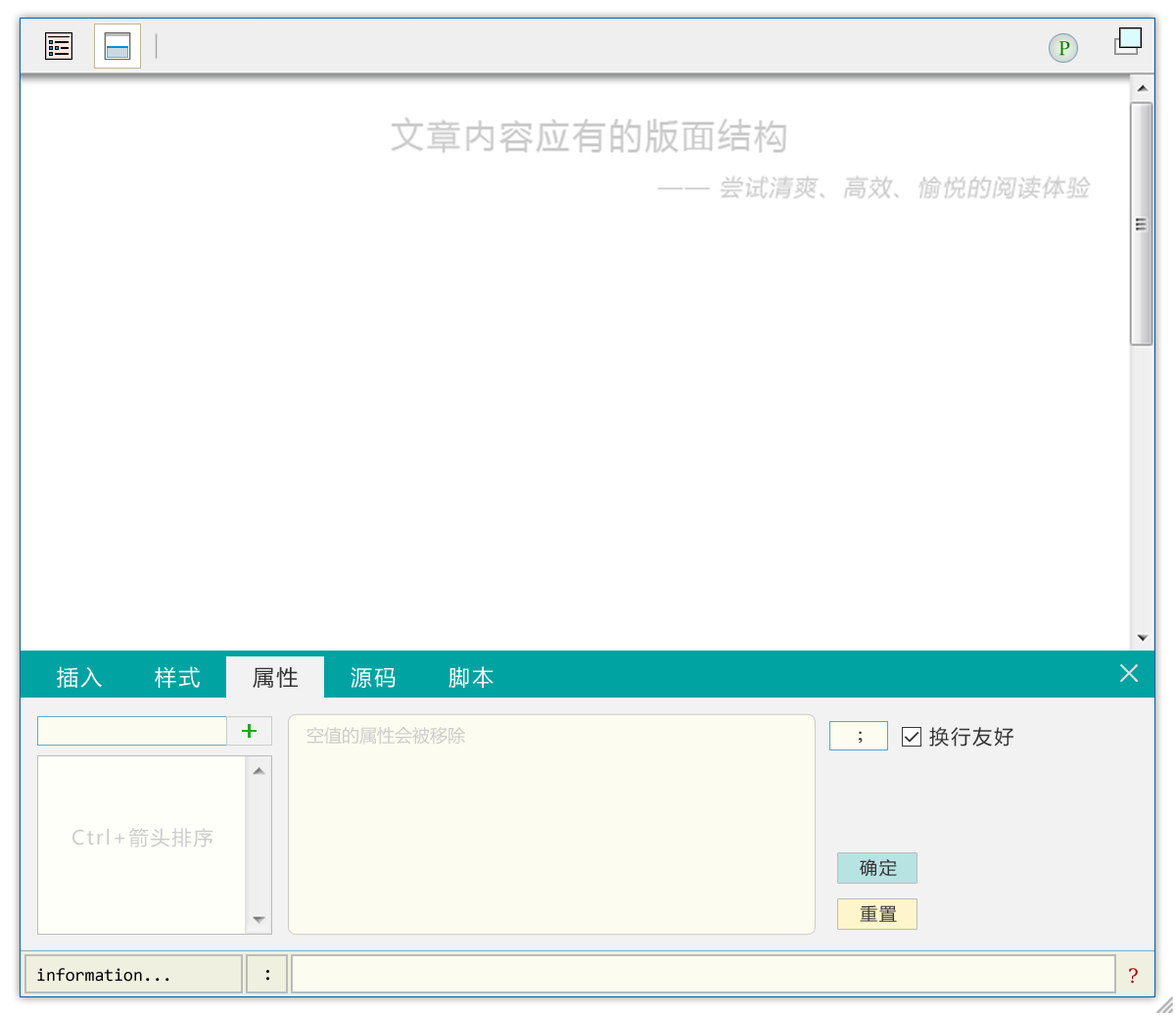
<style>
.page{position:relative;width:1175px;height:1015px;background:#ffffff}
.page>*{position:absolute;margin:0}
.t1{font:19.6px "Constantia";color:#1b7802}
.t2{font:21.5px "MicrosoftYaHei";letter-spacing:0.1em;color:#ffffff}
.t3{font:27.4px "NSimSun";letter-spacing:0.1em;color:#dddddd;font-weight:bold}
.t4{font:21.5px "MicrosoftYaHei";letter-spacing:0.1em;color:#333333}
.t5{font:17.6px "MicrosoftYaHei";color:#cccccc}
.t6{font:17.6px "TimesNewRomanPSMT";letter-spacing:0.1em;color:#333333;font-weight:bold}
.t7{font:19.6px "MicrosoftYaHei";letter-spacing:0.1em;color:#333333}
.t8{font:19.6px "MicrosoftYaHei";letter-spacing:0.1em;color:#cccccc}
.t9{font:17.6px "MicrosoftYaHei";letter-spacing:0.1em;color:#333333}
.t10{font:17.6px "Consolas";color:#000000}
.t11{font:19.6px "Consolas";color:#000000}
.t12{font:19.6px "DejaVuSerif";color:#aa0000}
</style>
<div class="page">
<p class="t1" style="left:1060px;top:41px;width:10px;height:15px">P</p>
<p class="t2" style="left:57px;top:666px;width:45px;height:22px">插入</p>
<p class="t2" style="left:155px;top:666px;width:45px;height:22px">样式</p>
<p class="t2" style="left:449px;top:666px;width:45px;height:22px">脚本</p>
<p class="t3" style="left:1120px;top:664px;width:19px;height:18px">×</p>
<p class="t4" style="left:253px;top:667px;width:45px;height:21px">属性</p>
<p class="t2" style="left:351px;top:667px;width:45px;height:21px">源码</p>
<p class="t5" style="left:307px;top:727px;width:158px;height:17px">空值的属性会被移除</p>
<p class="t6" style="left:859px;top:731px;width:4px;height:12px">;</p>
<p class="t7" style="left:929px;top:727px;width:85px;height:19px">换行友好</p>
<p class="t8" style="left:72px;top:828px;width:141px;height:19px">Ctrl+箭头排序</p>
<p class="t9" style="left:860px;top:859px;width:37px;height:18px">确定</p>
<p class="t9" style="left:860px;top:905px;width:37px;height:17px">重置</p>
<p class="t10" style="left:37px;top:968px;width:132px;height:13px">information...</p>
<p class="t11" style="left:266px;top:970px;width:3px;height:10px">:</p>
<p class="t12" style="left:1129px;top:968px;width:9px;height:15px">?</p>
</div>
